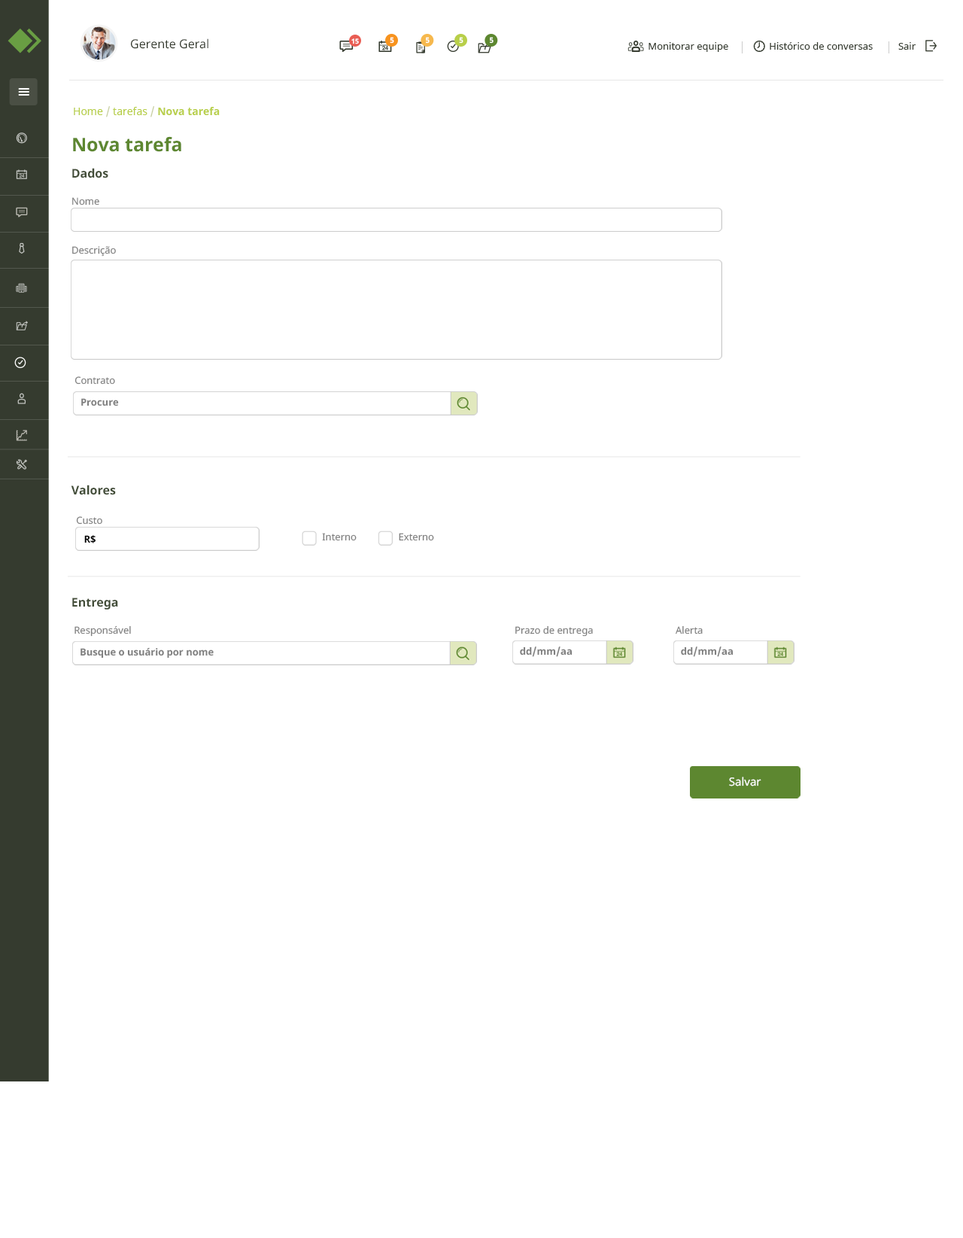
<style>
.page{position:relative;width:963px;height:1238px;background:#ffffff}
.page>*{position:absolute;margin:0}
.t1{font:12px "NotoSans";color:#353b2f}
.t2{font:6.8px "NotoSans-Bold";color:#ffffff}
.t3{font:7.5px "NotoSans-Bold";color:#ffffff}
.t4{font:9.8px "NotoSans";color:#353b2f}
.t5{font:10.5px "NotoSans-Bold";color:#b8cf49}
.t6{font:10.5px "NotoSans";color:#b8cf49}
.t7{font:10.5px "NotoSans";color:#c7cfa1}
.t8{font:18.8px "NotoSans-Bold";color:#5d8730}
.t9{font:12px "NotoSans-Bold";color:#424d38}
.t10{font:9.8px/48.9px "NotoSans";color:#808080}
.t11{font:9.8px "NotoSans";color:#808080}
.t12{font:9.8px "NotoSans-Bold";color:#808080}
.t13{font:9.8px/22.6px "NotoSans";color:#808080}
.t14{font:9.8px/18.8px "NotoSans-Bold";color:#000000}
.t15{font:11.3px "NotoSans";color:#ffffff}
</style>
<div class="page">
<p class="t1" style="left:131px;top:38px;width:77px;height:11px">Gerente Geral</p>
<p class="t2" style="left:351px;top:38px;width:8px;height:6px">15</p>
<p class="t3" style="left:390px;top:37px;width:4px;height:7px">5</p>
<p class="t3" style="left:426px;top:37px;width:4px;height:7px">5</p>
<p class="t3" style="left:459px;top:37px;width:5px;height:7px">5</p>
<p class="t3" style="left:490px;top:37px;width:4px;height:7px">5</p>
<p class="t4" style="left:649px;top:42px;width:267px;height:10px">Monitorar equipe                Histórico de conversas          Sair</p>
<p class="t5" style="left:74px;top:106px;width:146px;height:11px"><span class="t6">Home </span><span class="t7">/</span><span class="t6"> tarefas </span><span class="t7">/ </span>Nova tarefa</p>
<p class="t8" style="left:73px;top:136px;width:108px;height:16px">Nova tarefa</p>
<p class="t9" style="left:72px;top:168px;width:36px;height:10px">Dados</p>
<p class="t10" style="left:72px;top:197px;width:44px;height:60px">Nome<br>Descrição</p>
<p class="t11" style="left:75px;top:376px;width:40px;height:9px">Contrato</p>
<p class="t12" style="left:81px;top:398px;width:38px;height:8px">Procure</p>
<p class="t9" style="left:71px;top:485px;width:45px;height:10px">Valores</p>
<p class="t13" style="left:76px;top:516px;width:26px;height:27px">Custo<br><span class="t14">   R$</span></p>
<p class="t11" style="left:322px;top:533px;width:35px;height:8px">Interno</p>
<p class="t11" style="left:399px;top:533px;width:35px;height:8px">Externo</p>
<p class="t9" style="left:72px;top:598px;width:46px;height:12px">Entrega</p>
<p class="t11" style="left:75px;top:625px;width:56px;height:12px">Responsável</p>
<p class="t11" style="left:515px;top:625px;width:78px;height:12px">Prazo de entrega</p>
<p class="t11" style="left:676px;top:625px;width:27px;height:9px">Alerta</p>
<p class="t12" style="left:81px;top:647px;width:133px;height:11px">Busque o usuário por nome</p>
<p class="t12" style="left:520px;top:646px;width:53px;height:11px">dd/mm/aa</p>
<p class="t12" style="left:681px;top:646px;width:53px;height:11px">dd/mm/aa</p>
<p class="t15" style="left:729px;top:777px;width:33px;height:9px">Salvar</p>
</div>
